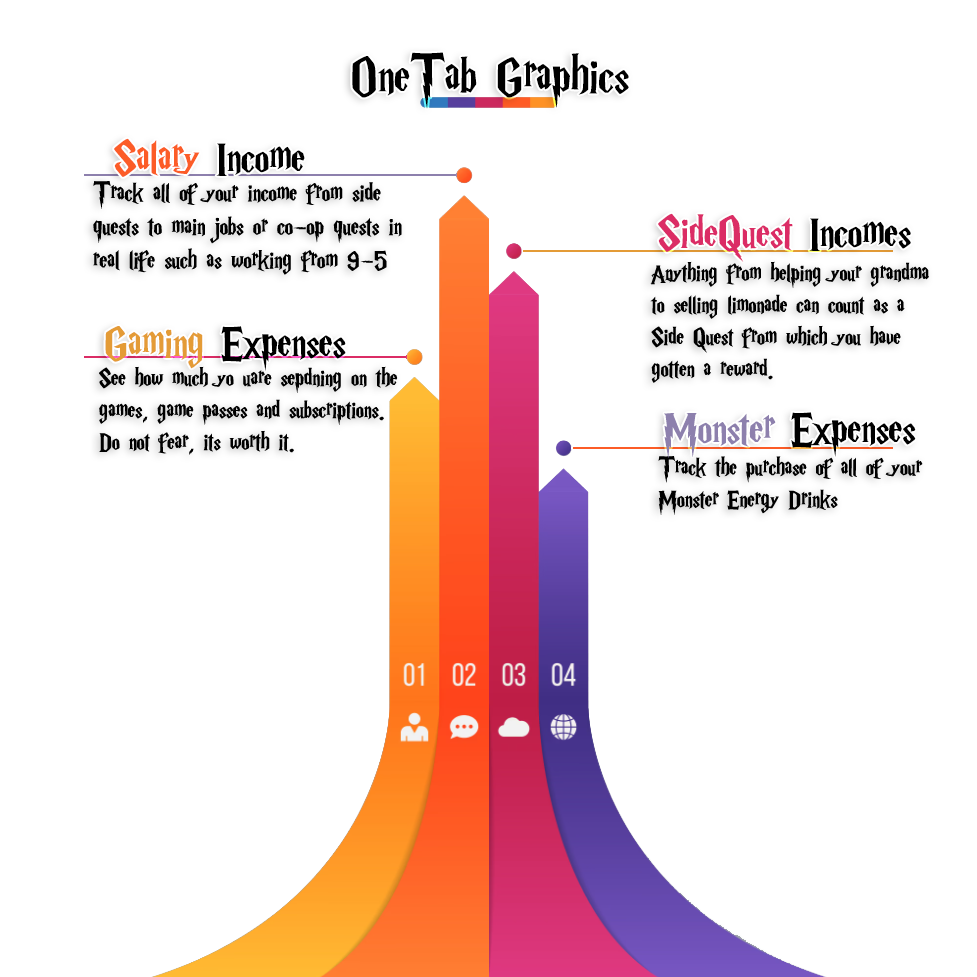
<style>
.page{position:relative;width:977px;height:977px;background:#ffffff}
.page>*{position:absolute;margin:0}
.t1{font:56px "HarryP";color:#000000}
.t2{font:49.3px "HarryP";color:#fc5c27}
.t3{font:49.3px "HarryP";color:#000000}
.t4{font:28px "HarryP";color:#000000}
.t5{font:49.3px "HarryP";color:#db2c65}
.t6{font:26.7px "HarryP";color:#000000}
.t7{font:49.3px "HarryP";color:#e49b36}
.t8{font:49.3px "HarryP";color:#8d80ad}
</style>
<div class="page">
<p class="t1" style="left:352px;top:52px;width:277px;height:57px">OneTab Graphics</p>
<p class="t2" style="left:114px;top:138px;width:191px;height:39px">Salary <span class="t3">Income</span></p>
<p class="t4" style="left:93px;top:181px;width:309px;height:94px">Track all of your income from side quests to main jobs or co-op quests in real life such as working from 9-5</p>
<p class="t5" style="left:658px;top:213px;width:253px;height:49px">SideQuest <span class="t3">Incomes</span></p>
<p class="t6" style="left:650px;top:261px;width:279px;height:122px">Anything from helping your grandma to selling limonade can count as a Side Quest from which you have gotten a reward.</p>
<p class="t3" style="left:105px;top:326px;width:241px;height:45px"><span class="t7">Gaming </span>Expenses</p>
<p class="t6" style="left:99px;top:366px;width:299px;height:89px">See how much yo uare sepdning on the games, game passes and subscriptions.<br>Do not fear, its worth it.</p>
<p class="t3" style="left:664px;top:412px;width:252px;height:46px"><span class="t8">Monster </span>Expenses</p>
<p class="t6" style="left:658px;top:456px;width:265px;height:59px">Track the purchase of all of your Monster Energy Drinks</p>
</div>
